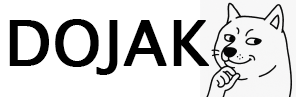
<style>
.page{position:relative;width:296px;height:97px;background:#ffffff}
.page>*{position:absolute;margin:0}
.t1{font:62.1px "LucidaSansUnicode";color:#000000;font-weight:bold}
</style>
<div class="page">
<p class="t1" style="left:9px;top:19px;width:200px;height:56px">DOJAK</p>
</div>
